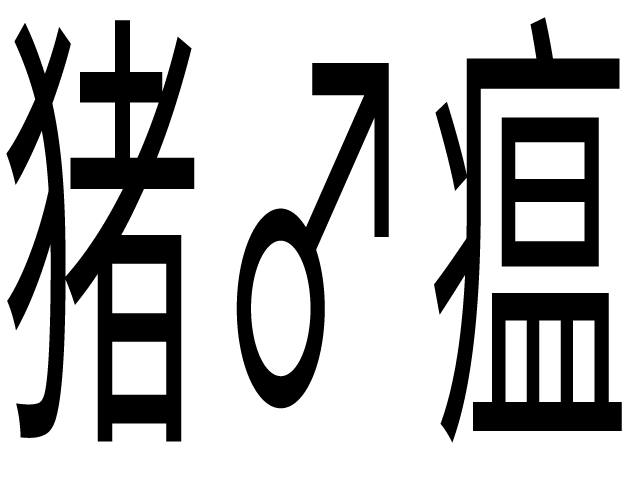
<style>
.page{position:relative;width:640px;height:480px;background:#ffffff}
.page>*{position:absolute;margin:0}
.t1{font:461.7px "SourceHanSansSC-Regular";letter-spacing:0.05em;color:#000000;scale:0.44 1}
</style>
<div class="page">
<p class="t1" style="left:6px;top:17px;width:616px;height:426px">猪♂瘟</p>
</div>
